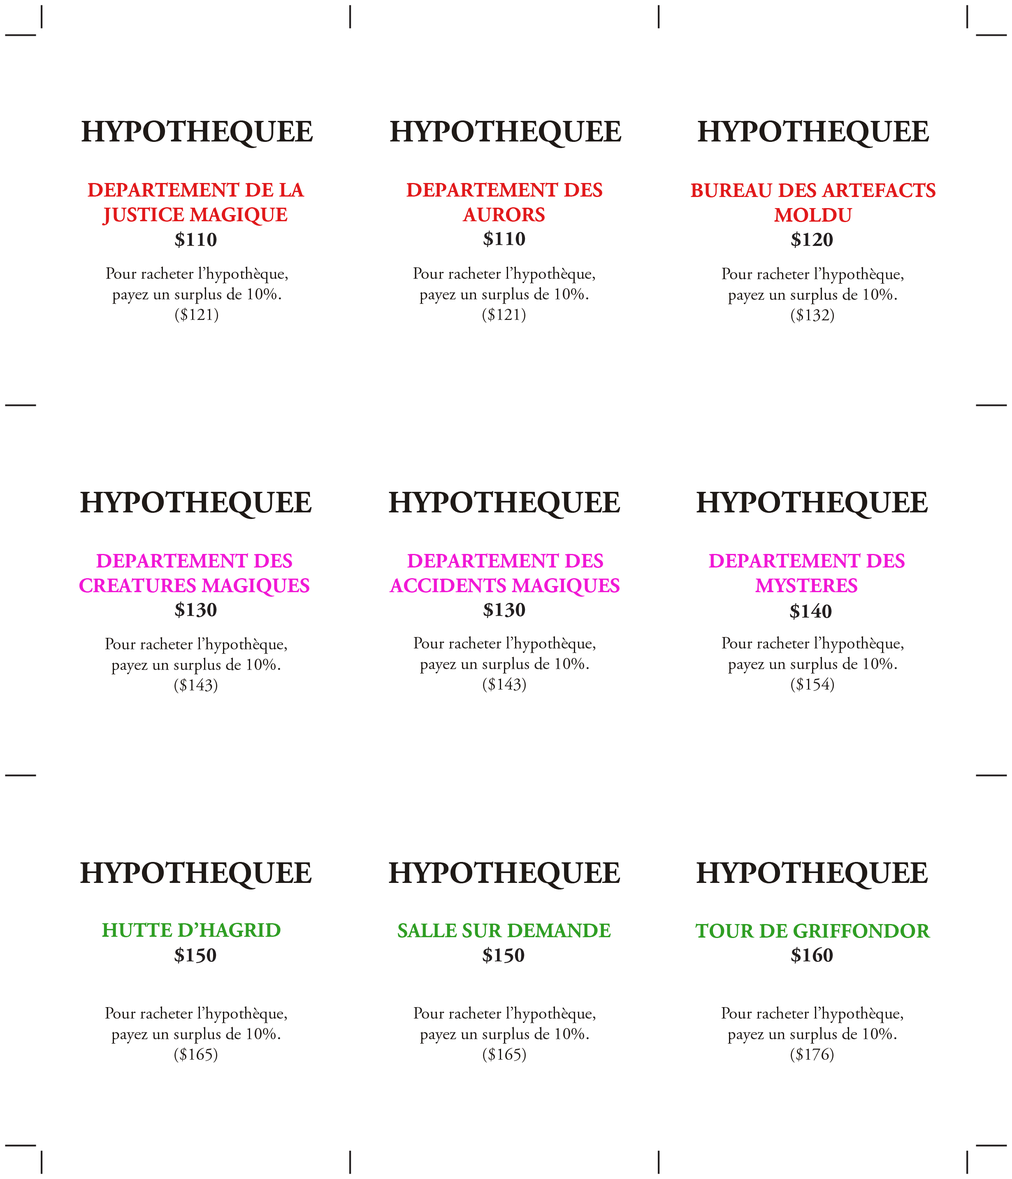
<style>
.page{position:relative;width:1012px;height:1179px;background:#ffffff}
.page>*{position:absolute;margin:0}
.t1{font:30.8px "AGaramond-Bold";color:#1f1a17}
.t2{font:4.9px "AGaramond-Bold";color:#e1191b}
.t3{font:17.1px "AGaramond-Regular";color:#1f1a17}
.t4{font:4.9px "AGaramond-Bold";color:#f118d5}
.t5{font:4.9px "AGaramond-Bold";color:#2f9e24}
</style>
<div class="page">
<p class="t1" style="left:81px;top:120px;width:232px;height:28px">HYPOTHEQUEE</p>
<p class="t1" style="left:390px;top:120px;width:231px;height:28px">HYPOTHEQUEE</p>
<p class="t1" style="left:697px;top:120px;width:232px;height:28px">HYPOTHEQUEE</p>
<p class="t2" style="left:88px;top:182px;width:216px;height:44px;text-align:center">DEPARTEMENT DE LA<br>JUSTICE MAGIQUE</p>
<p class="t2" style="left:406px;top:182px;width:196px;height:40px;text-align:center">DEPARTEMENT DES<br>AURORS</p>
<p class="t2" style="left:690px;top:183px;width:245px;height:39px;text-align:center">BUREAU DES ARTEFACTS<br>MOLDU</p>
<p class="t3" style="left:106px;top:266px;width:181px;height:57px;text-align:center">Pour racheter l’hypothèque,<br>payez un surplus de 10%.<br>($121)</p>
<p class="t3" style="left:413px;top:266px;width:182px;height:57px;text-align:center">Pour racheter l’hypothèque,<br>payez un surplus de 10%.<br>($121)</p>
<p class="t3" style="left:722px;top:267px;width:181px;height:56px;text-align:center">Pour racheter l’hypothèque,<br>payez un surplus de 10%.<br>($132)</p>
<p class="t1" style="left:80px;top:491px;width:232px;height:28px">HYPOTHEQUEE</p>
<p class="t1" style="left:389px;top:491px;width:231px;height:28px">HYPOTHEQUEE</p>
<p class="t1" style="left:696px;top:491px;width:232px;height:28px">HYPOTHEQUEE</p>
<p class="t4" style="left:79px;top:553px;width:230px;height:44px;text-align:center">DEPARTEMENT DES<br>CREATURES MAGIQUES</p>
<p class="t4" style="left:389px;top:553px;width:230px;height:44px;text-align:center">DEPARTEMENT DES<br>ACCIDENTS MAGIQUES</p>
<p class="t4" style="left:708px;top:553px;width:196px;height:40px;text-align:center">DEPARTEMENT DES<br>MYSTERES</p>
<p class="t3" style="left:105px;top:637px;width:182px;height:56px;text-align:center">Pour racheter l’hypothèque,<br>payez un surplus de 10%.<br>($143)</p>
<p class="t3" style="left:414px;top:636px;width:181px;height:56px;text-align:center">Pour racheter l’hypothèque,<br>payez un surplus de 10%.<br>($143)</p>
<p class="t3" style="left:722px;top:636px;width:181px;height:56px;text-align:center">Pour racheter l’hypothèque,<br>payez un surplus de 10%.<br>($154)</p>
<p class="t1" style="left:80px;top:861px;width:232px;height:28px">HYPOTHEQUEE</p>
<p class="t1" style="left:389px;top:861px;width:231px;height:28px">HYPOTHEQUEE</p>
<p class="t1" style="left:696px;top:861px;width:232px;height:28px">HYPOTHEQUEE</p>
<p class="t5" style="left:102px;top:922px;width:178px;height:15px;text-align:center">HUTTE D’HAGRID</p>
<p class="t5" style="left:398px;top:923px;width:213px;height:14px;text-align:center">SALLE SUR DEMANDE</p>
<p class="t5" style="left:695px;top:923px;width:235px;height:15px;text-align:center">TOUR DE GRIFFONDOR</p>
<p class="t3" style="left:105px;top:1006px;width:182px;height:56px;text-align:center">Pour racheter l’hypothèque,<br>payez un surplus de 10%.<br>($165)</p>
<p class="t3" style="left:414px;top:1006px;width:181px;height:56px;text-align:center">Pour racheter l’hypothèque,<br>payez un surplus de 10%.<br>($165)</p>
<p class="t3" style="left:721px;top:1006px;width:182px;height:56px;text-align:center">Pour racheter l’hypothèque,<br>payez un surplus de 10%.<br>($176)</p>
</div>
